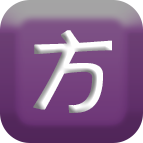
<style>
.page{position:relative;width:143px;height:143px}
.page>*{position:absolute;margin:0}
.t1{font:100px "Jkaton";font-weight:bold}
</style>
<div class="page">
<p class="t1" style="left:33px;top:30px;width:79px;height:83px">方</p>
</div>
